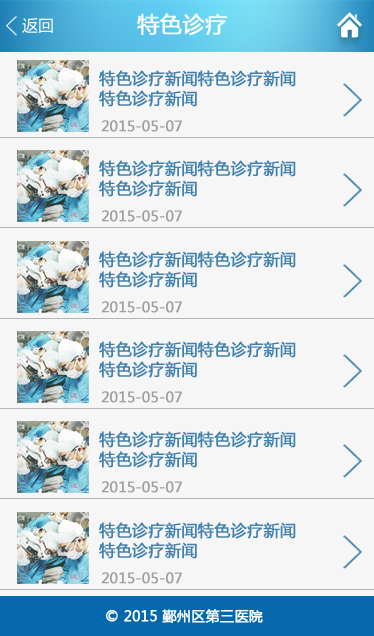
<style>
.page{position:relative;width:374px;height:636px;background:#f6f6f6}
.page>*{position:absolute;margin:0}
.t1{font:16px/20px "MicrosoftYaHei";color:#4081ad;font-weight:bold}
.t2{font:14px "MicrosoftYaHei";color:#9e9e9e;font-weight:bold}
.t3{font:14px "MicrosoftYaHei";color:#ffffff;font-weight:bold}
</style>
<div class="page">
<p class="t1" style="left:99px;top:70px;width:197px;height:37px">特色诊疗新闻特色诊疗新闻<br>特色诊疗新闻</p>
<p class="t2" style="left:101px;top:120px;width:81px;height:12px">2015-05-07</p>
<p class="t1" style="left:99px;top:160px;width:197px;height:37px">特色诊疗新闻特色诊疗新闻<br>特色诊疗新闻</p>
<p class="t2" style="left:101px;top:210px;width:81px;height:12px">2015-05-07</p>
<p class="t1" style="left:99px;top:251px;width:197px;height:37px">特色诊疗新闻特色诊疗新闻<br>特色诊疗新闻</p>
<p class="t2" style="left:101px;top:301px;width:81px;height:12px">2015-05-07</p>
<p class="t1" style="left:99px;top:341px;width:197px;height:37px">特色诊疗新闻特色诊疗新闻<br>特色诊疗新闻</p>
<p class="t2" style="left:101px;top:391px;width:81px;height:12px">2015-05-07</p>
<p class="t1" style="left:99px;top:431px;width:197px;height:37px">特色诊疗新闻特色诊疗新闻<br>特色诊疗新闻</p>
<p class="t2" style="left:101px;top:481px;width:81px;height:12px">2015-05-07</p>
<p class="t1" style="left:99px;top:522px;width:197px;height:37px">特色诊疗新闻特色诊疗新闻<br>特色诊疗新闻</p>
<p class="t2" style="left:101px;top:572px;width:81px;height:12px">2015-05-07</p>
<p class="t3" style="left:106px;top:609px;width:157px;height:15px">© 2015 鄞州区第三医院</p>
</div>
